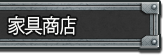
<style>
.page{position:relative;width:163px;height:55px}
.page>*{position:absolute;margin:0}
.t1{font:20px "GothicMB101Pr6N-Light";letter-spacing:-0.02em;color:#fbfbf9;scale:0.9 1}
</style>
<div class="page">
<p class="t1" style="left:8px;top:16px;width:69px;height:19px">家具商店</p>
</div>
